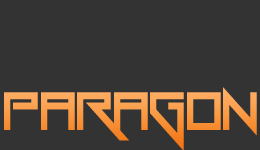
<style>
.page{position:relative;width:260px;height:150px;background:#333333}
.page>*{position:absolute;margin:0}
.t1{font:109.4px "Gang-Wolfik";color:#fba14f;scale:0.89 1}
</style>
<div class="page">
<p class="t1" style="left:4px;top:87px;width:253px;height:64px">PARAGON</p>
</div>
